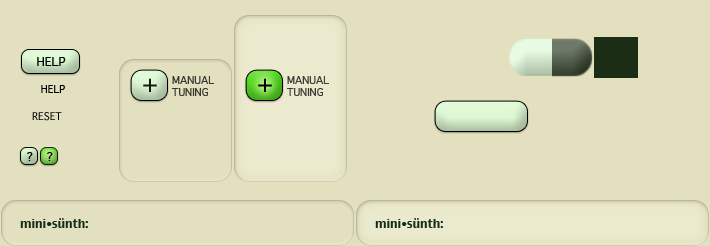
<style>
.page{position:relative;width:710px;height:246px;background:#e2e0be}
.page>*{position:absolute;margin:0}
.t1{font:12px "Geneva";color:#000000}
.t2{font:24px "Geneva";color:#000000}
.t3{font:10px "Geneva";color:#393830}
.t4{font:10px "Geneva";color:#3b3b34}
.t5{font:10px "Geneva";color:#000000}
.t6{font:12px "Charcoal";color:#152d19}
.t7{font:10px "Charcoal";color:#152d19}
</style>
<div class="page">
<p class="t1" style="left:37px;top:57px;width:29px;height:9px">HELP</p>
<p class="t2" style="left:143px;top:78px;width:14px;height:14px;opacity:0.9">+</p>
<p class="t3" style="left:172px;top:76px;width:42px;height:20px">MANUAL<br>TUNING</p>
<p class="t2" style="left:258px;top:78px;width:14px;height:14px">+</p>
<p class="t4" style="left:287px;top:76px;width:42px;height:20px">MANUAL<br>TUNING</p>
<p class="t5" style="left:41px;top:85px;width:24px;height:8px">HELP</p>
<p class="t5" style="left:32px;top:112px;width:30px;height:9px">RESET</p>
<p class="t1" style="left:27px;top:152px;width:6px;height:9px">?</p>
<p class="t1" style="left:47px;top:152px;width:6px;height:9px">?</p>
<p class="t6" style="left:20px;top:218px;width:68px;height:10px">mini<span class="t7">•</span>sünth:</p>
<p class="t6" style="left:375px;top:218px;width:68px;height:10px">mini<span class="t7">•</span>sünth:</p>
</div>
